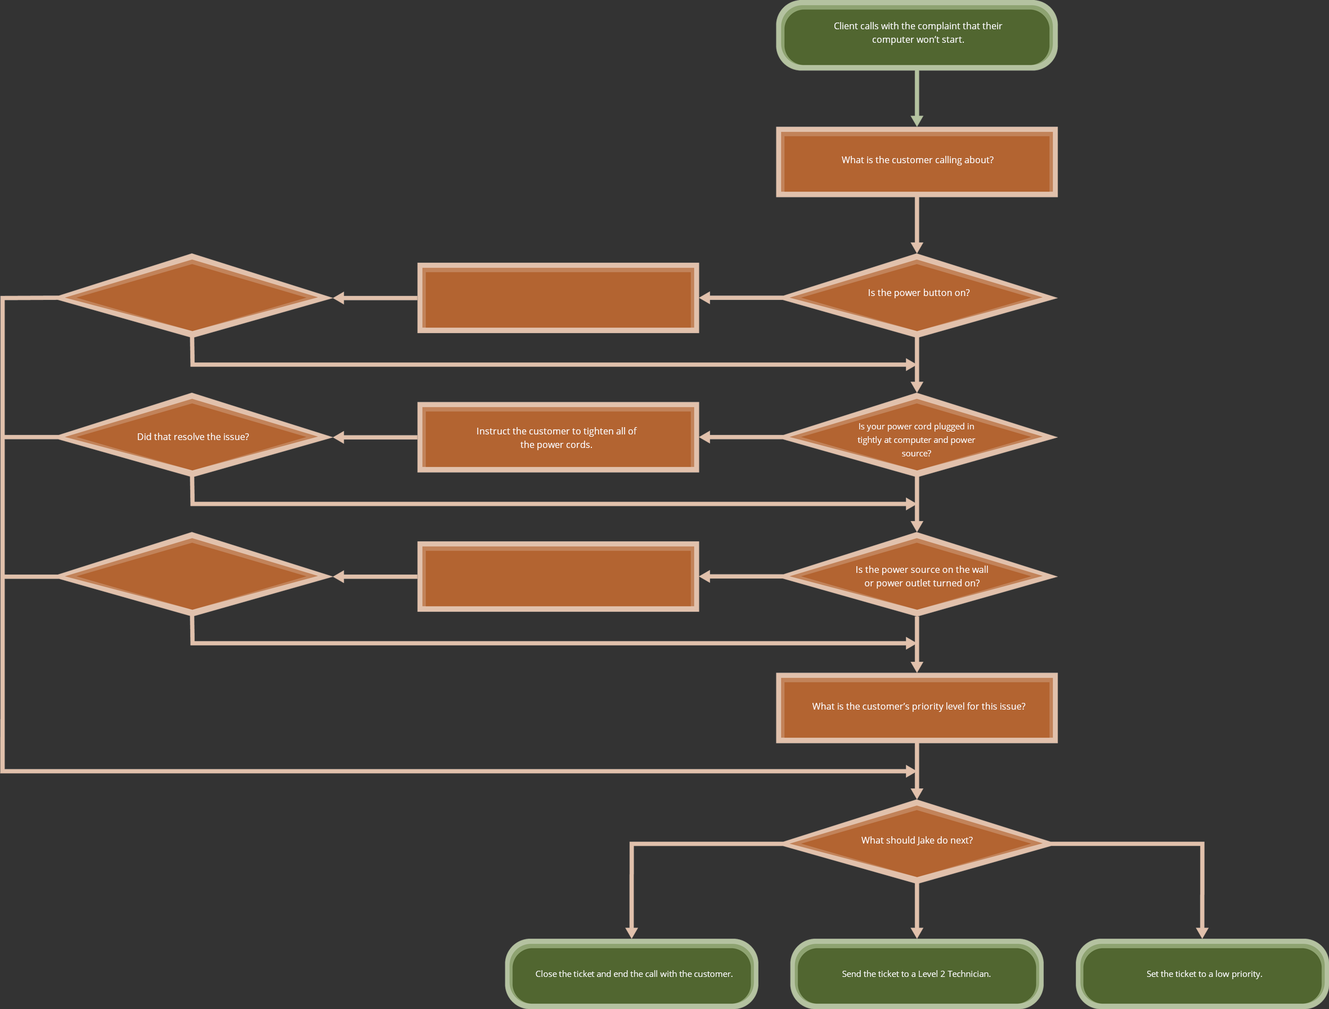
<style>
.page{position:relative;width:1329px;height:1009px;background:#333333}
.page>*{position:absolute;margin:0}
.t1{font:9px/13.5px "OpenSans";color:#ffffff}
.t2{font:9px "OpenSans";color:#ffffff}
.t3{font:8.4px/13.5px "OpenSans";color:#ffffff}
.t4{font:8.4px "OpenSans";color:#ffffff}
</style>
<div class="page">
<p class="t1" style="left:834px;top:22px;width:168px;height:23px;text-align:center">Client calls with the complaint that their <br>computer won’t start.</p>
<p class="t2" style="left:842px;top:156px;width:151px;height:9px">What is the customer calling about?</p>
<p class="t2" style="left:868px;top:289px;width:102px;height:9px">Is the power button on?</p>
<p class="t3" style="left:857px;top:422px;width:118px;height:34px;text-align:center">Is your power cord plugged in tightly at computer and power source?</p>
<p class="t2" style="left:138px;top:433px;width:111px;height:7px">Did that resolve the issue?</p>
<p class="t1" style="left:477px;top:427px;width:160px;height:23px;text-align:center">Instruct the customer to tighten all of <br>the power cords.</p>
<p class="t1" style="left:856px;top:565px;width:132px;height:23px;text-align:center">Is the power source on the wall or power outlet turned on?</p>
<p class="t2" style="left:812px;top:702px;width:213px;height:10px">What is the customer’s priority level for this issue?</p>
<p class="t2" style="left:861px;top:836px;width:112px;height:9px">What should Jake do next?</p>
<p class="t4" style="left:536px;top:970px;width:196px;height:6px">Close the ticket and end the call with the customer.</p>
<p class="t4" style="left:842px;top:970px;width:149px;height:6px">Send the ticket to a Level 2 Technician.</p>
<p class="t4" style="left:1146px;top:970px;width:116px;height:9px">Set the ticket to a low priority.</p>
</div>
